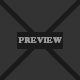
<style>
.page{position:relative;width:80px;height:80px;background:#333333}
.page>*{position:absolute;margin:0}
.t1{font:8px "CooperBlackStd";color:#9a9a9a}
</style>
<div class="page">
<p class="t1" style="left:18px;top:37px;width:44px;height:6px">PREVIEW</p>
</div>
